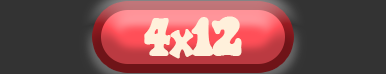
<style>
.page{position:relative;width:386px;height:74px;background:#333333}
.page>*{position:absolute;margin:0}
.t1{font:50px "SlopTM-Regular";color:#fff0db}
.t2{font:34px "SlopTM-Regular";color:#fff0db}
</style>
<div class="page">
<p class="t1" style="left:144px;top:16px;width:98px;height:43px">4<span class="t2">x</span>12</p>
</div>
